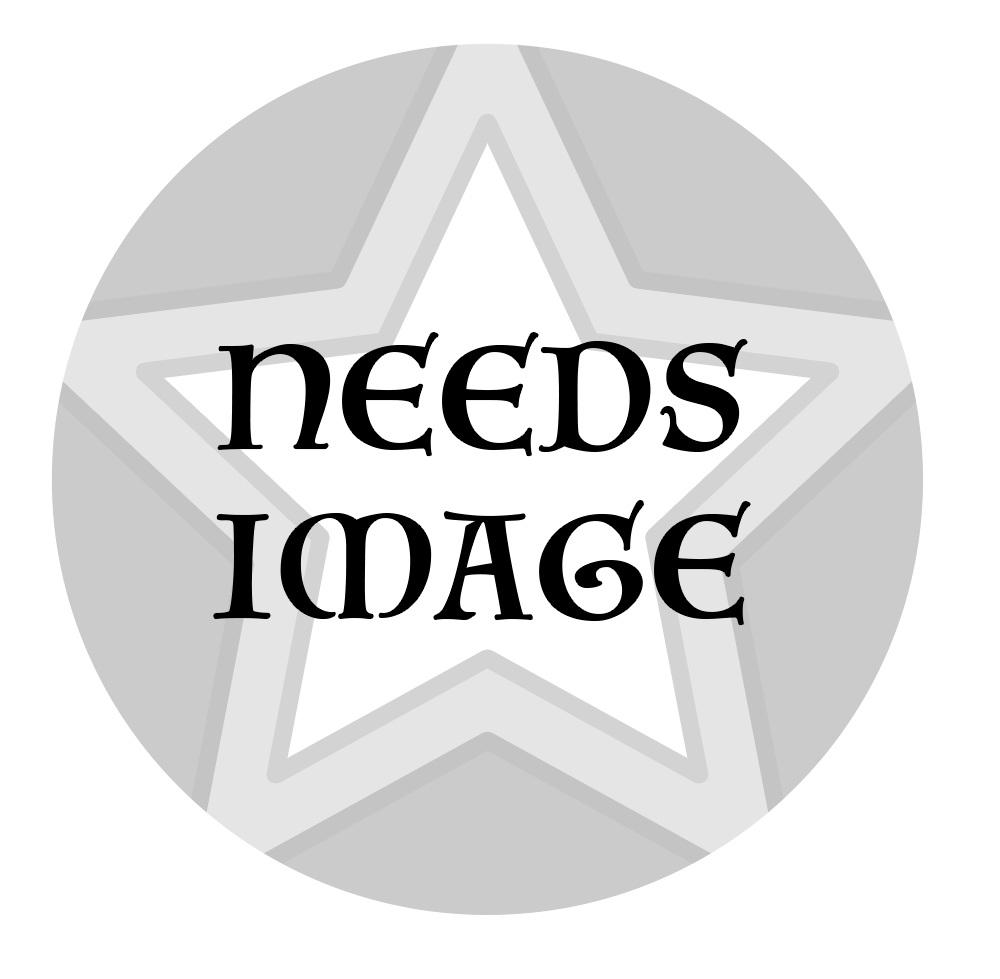
<style>
.page{position:relative;width:1000px;height:979px;background:#ffffff}
.page>*{position:absolute;margin:0}
.t1{font:141.4px "Luminari-Regular";letter-spacing:0.05em;color:#000000}
</style>
<div class="page">
<p class="t1" style="left:214px;top:333px;width:536px;height:292px;text-align:center">NEEDS<br>IMAGE</p>
</div>
